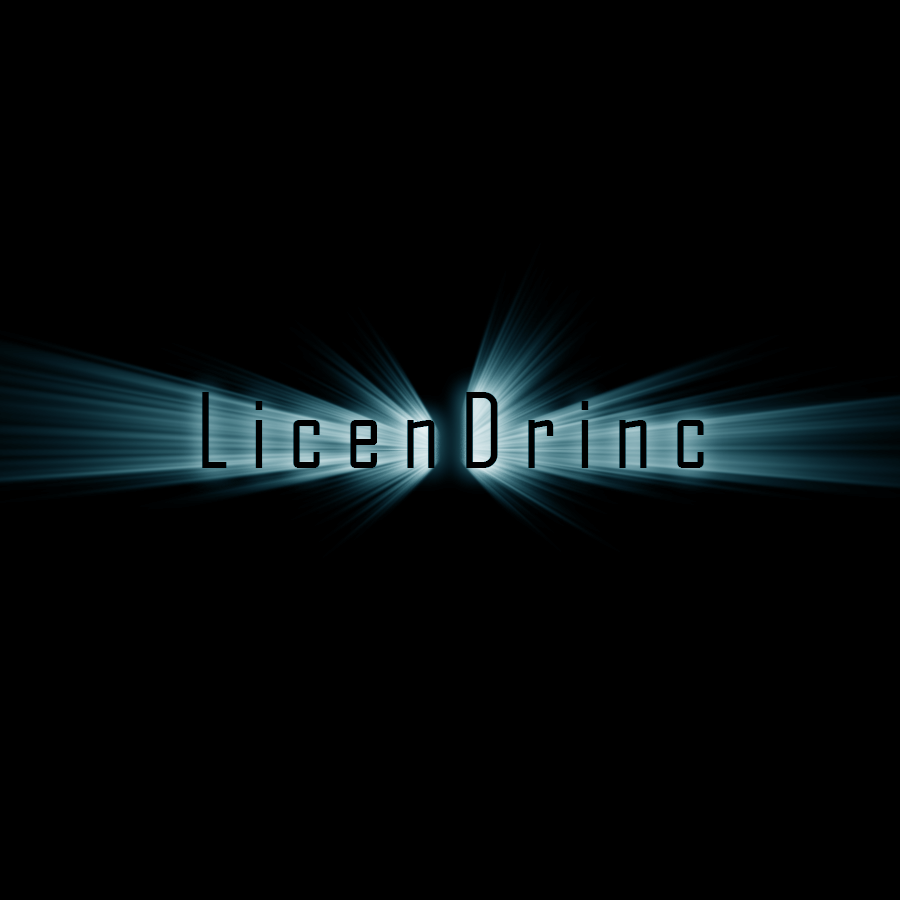
<style>
.page{position:relative;width:900px;height:900px;background:#000000}
.page>*{position:absolute;margin:0}
.t1{font:100px "AgencyFB-Reg";letter-spacing:0.2em;color:#000000}
</style>
<div class="page">
<p class="t1" style="left:202px;top:392px;width:502px;height:76px">LicenDrinc</p>
</div>
